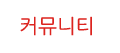
<style>
.page{position:relative;width:120px;height:53px;background:#ffffff}
.page>*{position:absolute;margin:0}
.t1{font:19.9px "NanumGothic";color:#dc241f}
</style>
<div class="page">
<p class="t1" style="left:20px;top:16px;width:72px;height:20px">커뮤니티</p>
</div>
